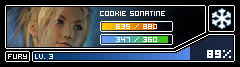
<style>
.page{position:relative;width:240px;height:67px;background:#000000}
.page>*{position:absolute;margin:0}
.t1{font:8px "Hooge0555";color:#ffffff}
</style>
<div class="page">
<p class="t1" style="left:100px;top:11px;width:65px;height:5px">cookie sonatine</p>
<p class="t1" style="left:116px;top:24px;width:41px;height:5px">635 / 880</p>
<p class="t1" style="left:116px;top:37px;width:41px;height:5px">347 / 360</p>
<p class="t1" style="left:8px;top:54px;width:19px;height:5px">fury</p>
<p class="t1" style="left:35px;top:54px;width:18px;height:5px">lv. 3</p>
</div>
